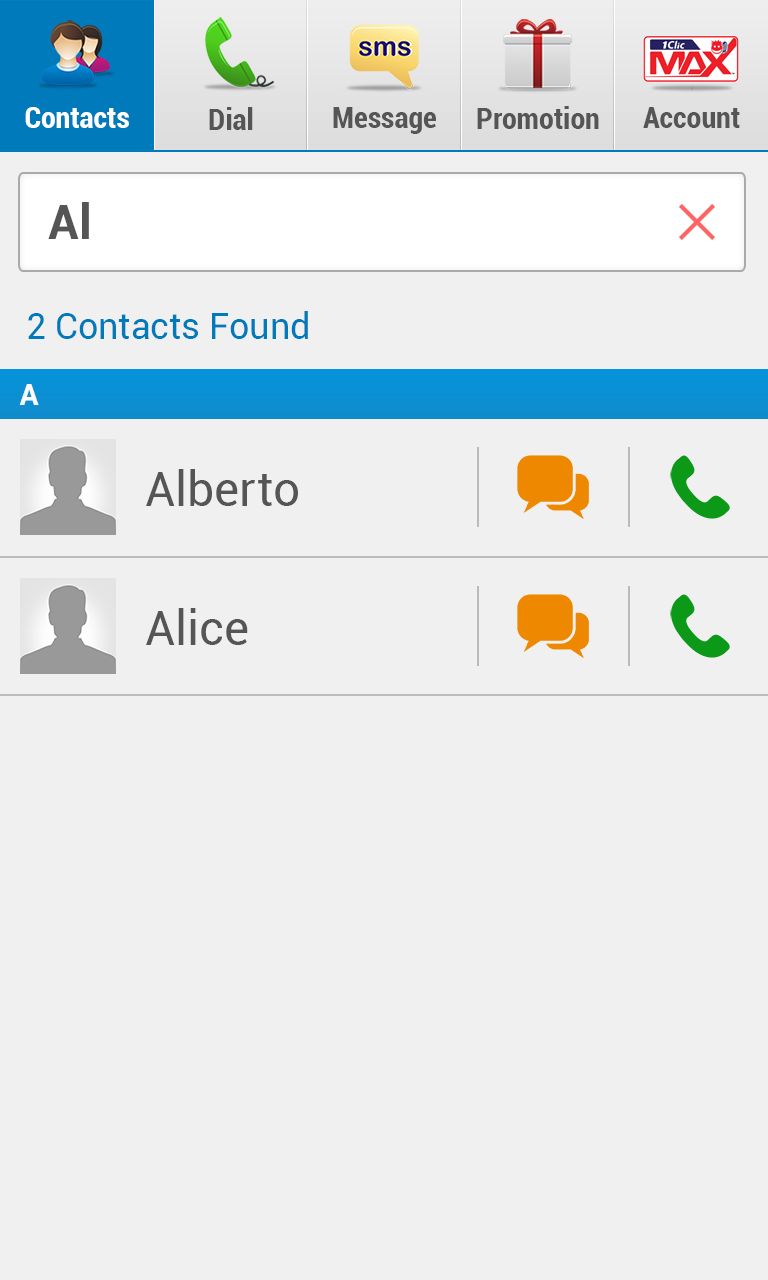
<style>
.page{position:relative;width:768px;height:1280px;background:#f0f0f0}
.page>*{position:absolute;margin:0}
.t1{font:30px "Roboto-BoldCondensed";color:#ffffff}
.t2{font:30px "Roboto-BoldCondensed";color:#555555}
.t3{font:48px "Roboto-Bold";color:#555555}
.t4{font:36px "Roboto-Regular";color:#007abb}
.t5{font:30px "Roboto-Bold";color:#ffffff}
.t6{font:48px "Roboto-Regular";color:#555555}
</style>
<div class="page">
<p class="t1" style="left:25px;top:107px;width:104px;height:21px">Contacts</p>
<p class="t2" style="left:209px;top:107px;width:44px;height:23px">Dial</p>
<p class="t2" style="left:333px;top:107px;width:103px;height:27px">Message</p>
<p class="t2" style="left:477px;top:106px;width:122px;height:23px">Promotion</p>
<p class="t2" style="left:643px;top:107px;width:97px;height:21px">Account</p>
<p class="t3" style="left:48px;top:202px;width:41px;height:37px">Al</p>
<p class="t4" style="left:28px;top:311px;width:280px;height:28px">2 Contacts Found</p>
<p class="t5" style="left:19px;top:384px;width:20px;height:21px">A</p>
<p class="t6" style="left:146px;top:469px;width:152px;height:37px">Alberto</p>
<p class="t6" style="left:146px;top:608px;width:102px;height:37px">Alice</p>
</div>
